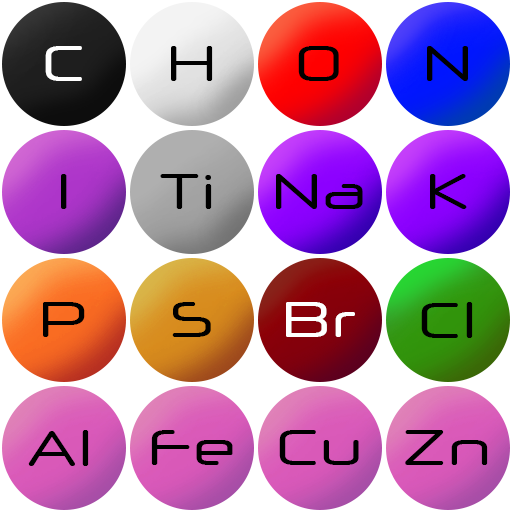
<style>
.page{position:relative;width:512px;height:512px;background:#ffffff}
.page>*{position:absolute;margin:0}
.t1{font:50px "NeuropolXRg-Regular";color:#ffffff}
.t2{font:50px "NeuropolXRg-Regular";color:#000000}
</style>
<div class="page">
<p class="t1" style="left:45px;top:46px;width:37px;height:35px">C</p>
<p class="t2" style="left:171px;top:46px;width:42px;height:35px">H</p>
<p class="t2" style="left:298px;top:46px;width:41px;height:35px">O</p>
<p class="t2" style="left:427px;top:46px;width:41px;height:35px">N</p>
<p class="t2" style="left:61px;top:174px;width:6px;height:35px">I</p>
<p class="t2" style="left:160px;top:174px;width:52px;height:35px">Ti</p>
<p class="t2" style="left:276px;top:174px;width:87px;height:35px">Na</p>
<p class="t2" style="left:430px;top:174px;width:37px;height:35px">K</p>
<p class="t2" style="left:43px;top:302px;width:42px;height:35px">P</p>
<p class="t2" style="left:172px;top:302px;width:39px;height:35px">S</p>
<p class="t1" style="left:286px;top:302px;width:69px;height:35px">Br</p>
<p class="t2" style="left:421px;top:302px;width:52px;height:36px">Cl</p>
<p class="t2" style="left:28px;top:430px;width:61px;height:36px">Al</p>
<p class="t2" style="left:151px;top:430px;width:82px;height:35px">Fe</p>
<p class="t2" style="left:279px;top:430px;width:80px;height:35px">Cu</p>
<p class="t2" style="left:405px;top:430px;width:83px;height:35px">Zn</p>
</div>
